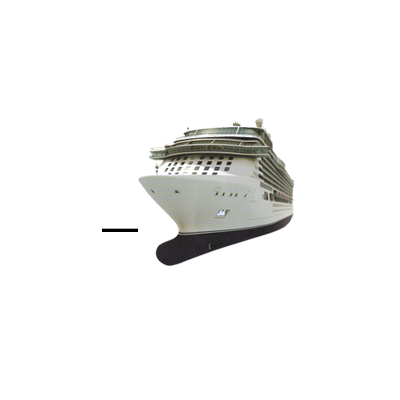
<style>
.page{position:relative;width:400px;height:400px;background:#ffffff}
.page>*{position:absolute;margin:0}
.t1{font:72px "MyriadPro-Regular";color:#000000}
</style>
<div class="page">
<p class="t1" style="left:102px;top:228px;width:36px;height:4px">_</p>
</div>
